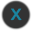
<style>
.page{position:relative;width:32px;height:32px;background:#333333}
.page>*{position:absolute;margin:0}
.t1{font:13.9px "KeepCalm-Medium";color:#1985a1}
</style>
<div class="page">
<p class="t1" style="left:10px;top:8px;width:12px;height:13px">X</p>
</div>
